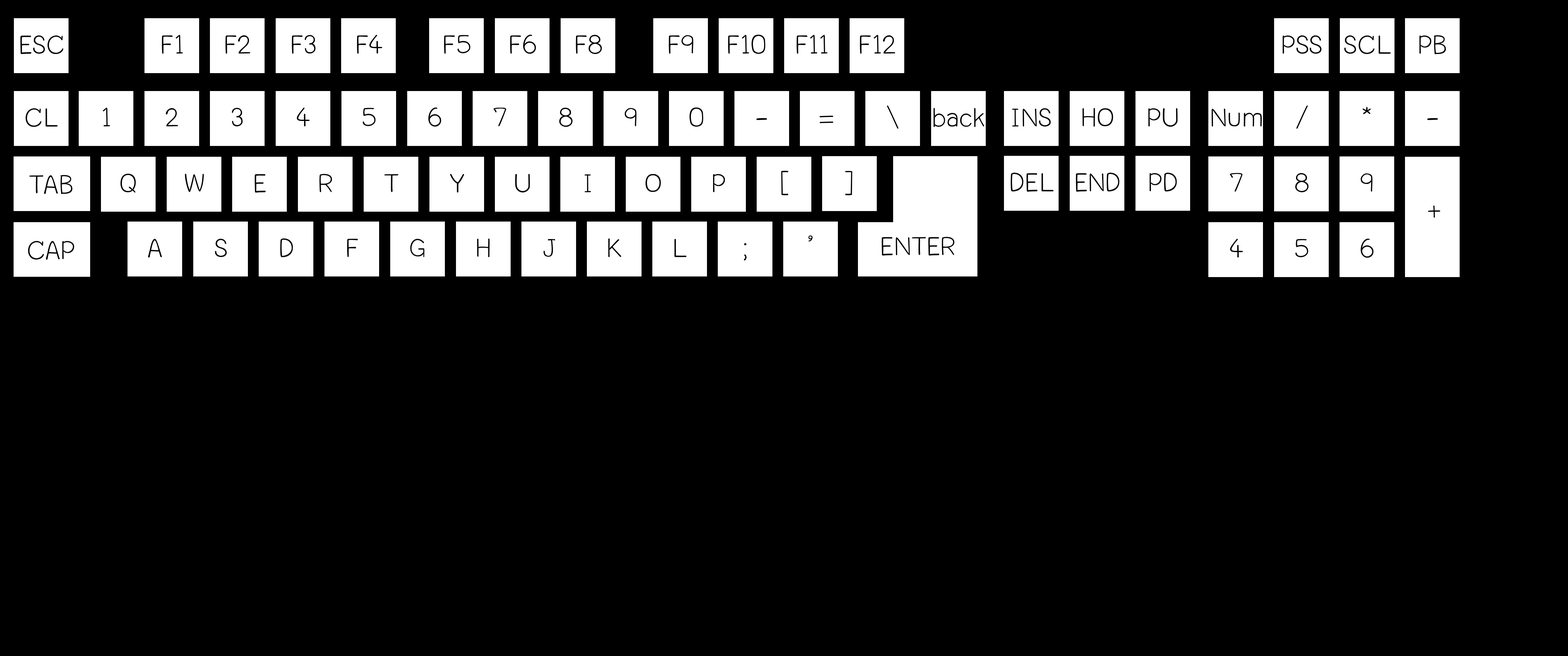
<style>
.page{position:relative;width:1568px;height:656px;background:#000000}
.page>*{position:absolute;margin:0}
.t1{font:36.5px "LayijiMaHaNiYomBAO1.2";color:#000000}
.t2{font:36.5px "LayijiMaHaNiYomBAO1.2";color:#010101}
</style>
<div class="page">
<p class="t1" style="left:20px;top:35px;width:43px;height:19px">ESC</p>
<p class="t1" style="left:162px;top:35px;width:21px;height:19px">F1</p>
<p class="t1" style="left:225px;top:35px;width:25px;height:19px">F2</p>
<p class="t1" style="left:292px;top:35px;width:24px;height:19px">F3</p>
<p class="t1" style="left:357px;top:35px;width:25px;height:19px">F4</p>
<p class="t1" style="left:444px;top:35px;width:26px;height:19px">F5</p>
<p class="t1" style="left:510px;top:35px;width:26px;height:19px">F6</p>
<p class="t1" style="left:576px;top:35px;width:26px;height:19px">F8</p>
<p class="t1" style="left:669px;top:35px;width:24px;height:19px">F9</p>
<p class="t1" style="left:728px;top:35px;width:37px;height:19px">F10</p>
<p class="t1" style="left:797px;top:35px;width:31px;height:19px">F11</p>
<p class="t1" style="left:860px;top:35px;width:35px;height:19px">F12</p>
<p class="t1" style="left:1282px;top:35px;width:40px;height:19px">PSS</p>
<p class="t1" style="left:1344px;top:35px;width:47px;height:19px">SCL</p>
<p class="t1" style="left:1419px;top:35px;width:27px;height:19px">PB</p>
<p class="t1" style="left:26px;top:108px;width:32px;height:19px">CL</p>
<p class="t1" style="left:103px;top:108px;width:7px;height:19px">1</p>
<p class="t1" style="left:166px;top:108px;width:12px;height:19px">2</p>
<p class="t1" style="left:232px;top:108px;width:11px;height:19px">3</p>
<p class="t1" style="left:297px;top:108px;width:13px;height:19px">4</p>
<p class="t1" style="left:363px;top:108px;width:13px;height:18px">5</p>
<p class="t1" style="left:428px;top:107px;width:13px;height:20px">6</p>
<p class="t1" style="left:493px;top:108px;width:13px;height:18px">7</p>
<p class="t1" style="left:559px;top:108px;width:14px;height:19px">8</p>
<p class="t1" style="left:625px;top:108px;width:12px;height:18px">9</p>
<p class="t1" style="left:689px;top:107px;width:14px;height:20px">0</p>
<p class="t1" style="left:887px;top:106px;width:11px;height:23px">\</p>
<p class="t1" style="left:933px;top:108px;width:51px;height:19px">back</p>
<p class="t1" style="left:1012px;top:108px;width:39px;height:19px">INSERT</p>
<p class="t1" style="left:1082px;top:108px;width:31px;height:19px">HOME</p>
<p class="t1" style="left:1148px;top:108px;width:30px;height:19px">PU</p>
<p class="t1" style="left:1211px;top:109px;width:51px;height:18px">Num Lock</p>
<p class="t1" style="left:1296px;top:106px;width:12px;height:23px">/</p>
<p class="t1" style="left:1362px;top:107px;width:9px;height:7px">*</p>
<p class="t1" style="left:756px;top:118px;width:11px;height:2px">-</p>
<p class="t1" style="left:819px;top:116px;width:15px;height:7px">=</p>
<p class="t1" style="left:1427px;top:118px;width:11px;height:2px">-</p>
<p class="t1" style="left:120px;top:174px;width:16px;height:19px">Q</p>
<p class="t1" style="left:185px;top:174px;width:19px;height:18px">W</p>
<p class="t1" style="left:319px;top:174px;width:13px;height:18px">R</p>
<p class="t1" style="left:450px;top:174px;width:14px;height:19px">Y</p>
<p class="t1" style="left:515px;top:174px;width:15px;height:19px">U</p>
<p class="t1" style="left:781px;top:171px;width:7px;height:24px">]</p>
<p class="t1" style="left:845px;top:171px;width:7px;height:24px">[</p>
<p class="t1" style="left:1010px;top:173px;width:44px;height:19px">DELETE</p>
<p class="t1" style="left:1076px;top:173px;width:43px;height:19px">END</p>
<p class="t1" style="left:1149px;top:173px;width:28px;height:19px">PD</p>
<p class="t1" style="left:1230px;top:173px;width:13px;height:19px">7</p>
<p class="t1" style="left:1295px;top:173px;width:14px;height:19px">8</p>
<p class="t1" style="left:1361px;top:174px;width:12px;height:18px">9</p>
<p class="t1" style="left:29px;top:175px;width:44px;height:19px">TAB</p>
<p class="t1" style="left:255px;top:174px;width:11px;height:19px">E</p>
<p class="t1" style="left:384px;top:174px;width:15px;height:18px">T</p>
<p class="t1" style="left:584px;top:174px;width:7px;height:18px">I</p>
<p class="t1" style="left:646px;top:174px;width:15px;height:18px">O</p>
<p class="t1" style="left:713px;top:174px;width:12px;height:18px">P</p>
<p class="t1" style="left:1428px;top:205px;width:12px;height:13px">+</p>
<p class="t1" style="left:28px;top:241px;width:46px;height:19px">CAP</p>
<p class="t1" style="left:148px;top:239px;width:14px;height:19px">A</p>
<p class="t1" style="left:215px;top:239px;width:12px;height:18px">S</p>
<p class="t1" style="left:280px;top:238px;width:13px;height:19px">D</p>
<p class="t1" style="left:347px;top:239px;width:11px;height:18px">F</p>
<p class="t1" style="left:410px;top:239px;width:14px;height:18px">G</p>
<p class="t1" style="left:477px;top:239px;width:13px;height:18px">H</p>
<p class="t1" style="left:543px;top:239px;width:12px;height:18px">J</p>
<p class="t1" style="left:608px;top:238px;width:13px;height:19px">K</p>
<p class="t1" style="left:674px;top:239px;width:13px;height:18px">L</p>
<p class="t1" style="left:744px;top:243px;width:2px;height:18px">;</p>
<p class="t1" style="left:808px;top:236px;width:5px;height:6px">‘</p>
<p class="t2" style="left:882px;top:237px;width:73px;height:19px">ENTER</p>
<p class="t1" style="left:1230px;top:239px;width:13px;height:19px">4</p>
<p class="t1" style="left:1295px;top:239px;width:13px;height:18px">5</p>
<p class="t1" style="left:1361px;top:239px;width:13px;height:19px">6</p>
</div>
